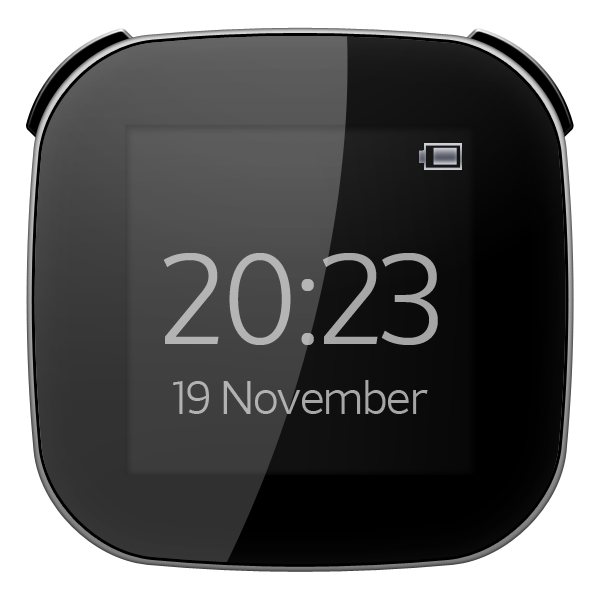
<style>
.page{position:relative;width:600px;height:600px;background:#ffffff}
.page>*{position:absolute;margin:0}
.t1{font:128px "SoMA-Roman";letter-spacing:-0.025em;color:#b3b3b3}
.t2{font:48px "SoMA-Roman";letter-spacing:-0.025em;color:#a7a7a7}
</style>
<div class="page">
<p class="t1" style="left:163px;top:253px;width:275px;height:92px">20:23</p>
<p class="t2" style="left:173px;top:379px;width:255px;height:35px">19 November</p>
</div>
